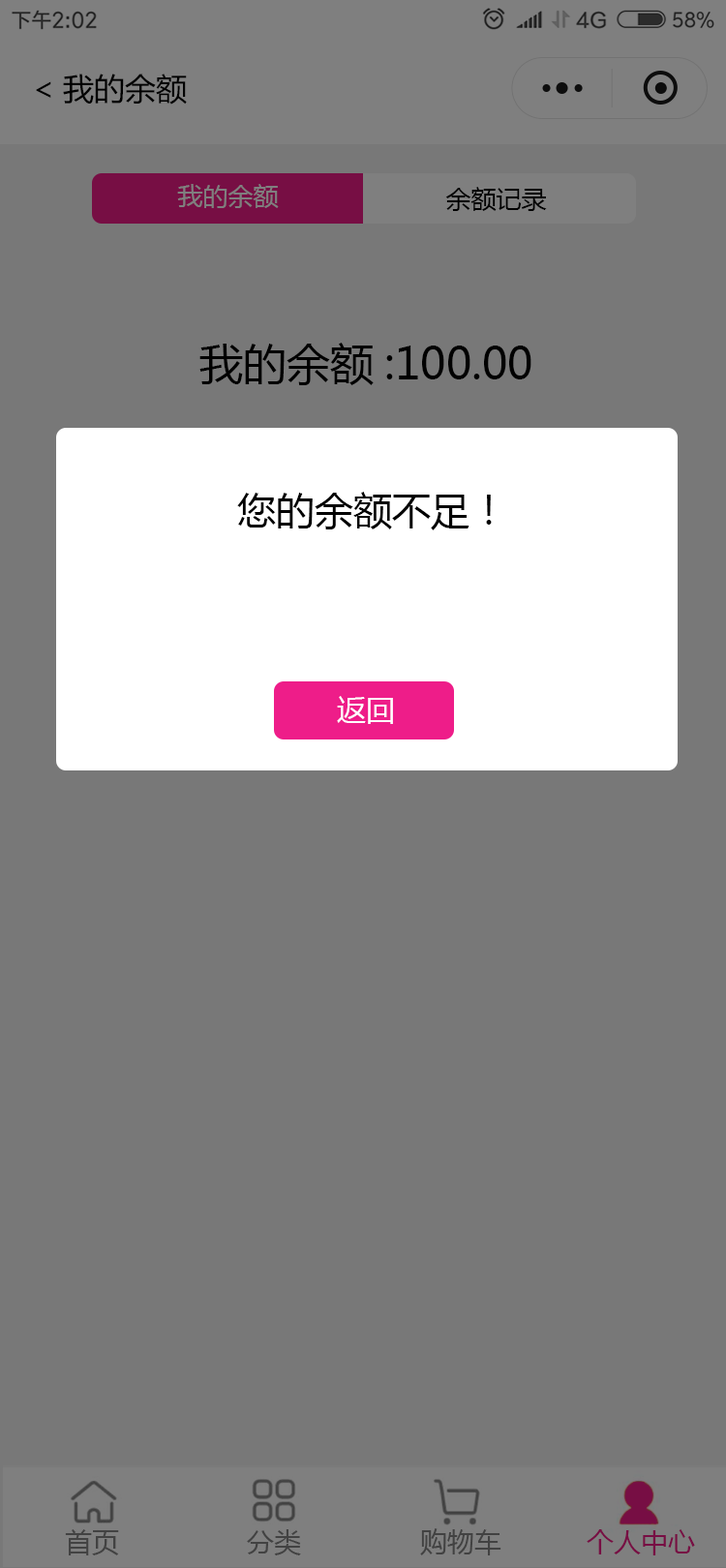
<style>
.page{position:relative;width:726px;height:1568px;background:#787878}
.page>*{position:absolute;margin:0}
.t1{font:31px "MicrosoftYaHei";color:#000000}
.t2{font:25.2px "MicrosoftYaHei";color:#7f7f7f}
.t3{font:25.2px "MicrosoftYaHei";color:#000000}
.t4{font:43.6px "MicrosoftYaHei";color:#000000}
.t5{font:38.7px "MicrosoftYaHei";color:#000000}
.t6{font:29px "MicrosoftYaHei";color:#ffffff}
</style>
<div class="page">
<p class="t1" style="left:36px;top:74px;width:151px;height:31px">&lt;我的余额</p>
<p class="t2" style="left:177px;top:184px;width:102px;height:24px">我的余额</p>
<p class="t3" style="left:445px;top:187px;width:102px;height:24px">余额记录</p>
<p class="t4" style="left:199px;top:343px;width:332px;height:42px">我的余额:100.00</p>
<p class="t5" style="left:237px;top:492px;width:255px;height:38px">您的余额不足！</p>
<p class="t6" style="left:337px;top:696px;width:56px;height:28px">返回</p>
</div>
